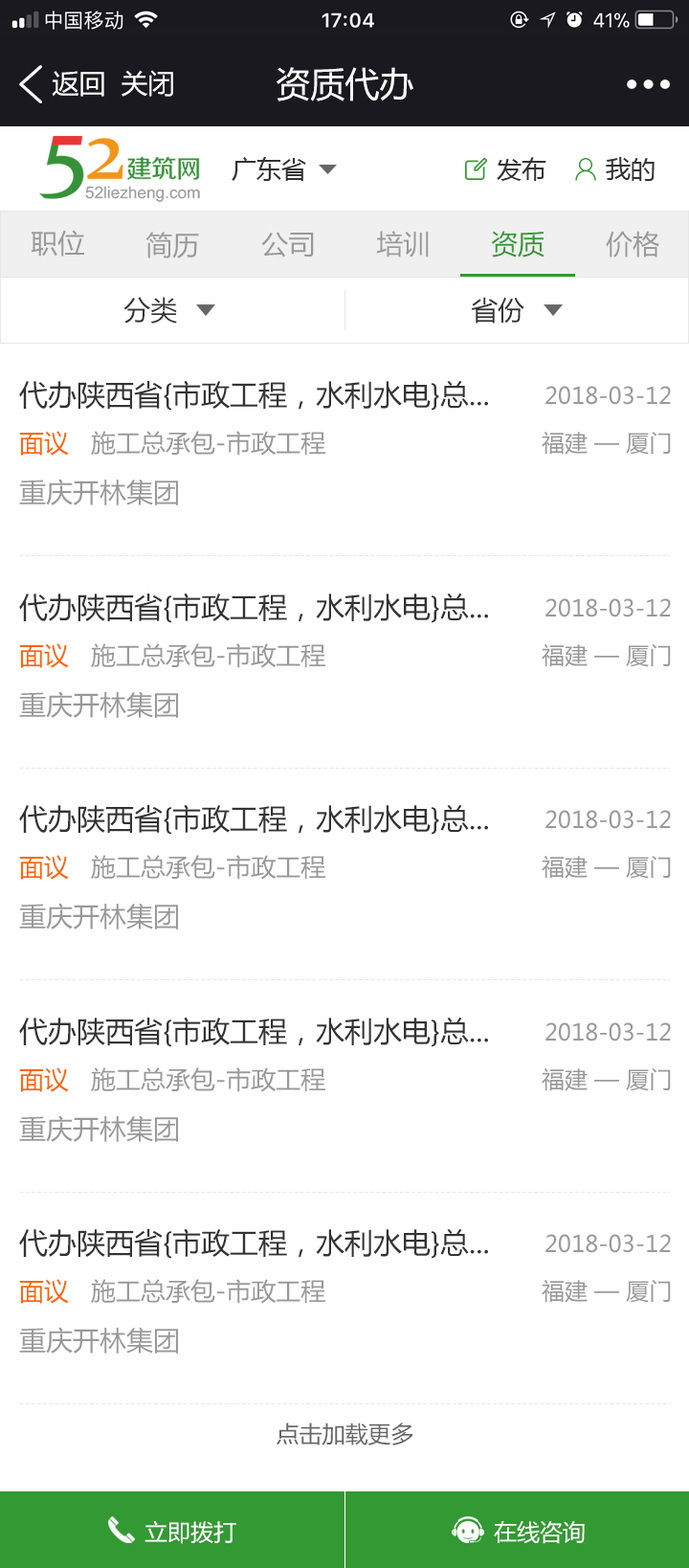
<style>
.page{position:relative;width:689px;height:1568px;background:#ffffff}
.page>*{position:absolute;margin:0}
.t1{font:26.8px "MicrosoftYaHei";color:#ffffff}
.t2{font:34.5px "MicrosoftYaHei";color:#ffffff}
.t3{font:24.9px "MicrosoftYaHei";color:#333333}
.t4{font:26.8px "MicrosoftYaHei";color:#999999}
.t5{font:26.8px "MicrosoftYaHei";color:#339933}
.t6{font:26.8px "MicrosoftYaHei";color:#333333}
.t7{font:28.7px "MicrosoftYaHei";color:#333333}
.t8{font:23px "MicrosoftYaHei";color:#999999}
.t9{font:24.9px "MicrosoftYaHei";color:#999999}
.t10{font:24.9px "MicrosoftYaHei";color:#ff6600}
.t11{font:23px "MicrosoftYaHei";color:#666666}
.t12{font:23px "MicrosoftYaHei";color:#ffffff}
</style>
<div class="page">
<p class="t1" style="left:52px;top:71px;width:52px;height:26px">返回</p>
<p class="t1" style="left:122px;top:70px;width:51px;height:27px">关闭</p>
<p class="t2" style="left:277px;top:67px;width:137px;height:34px">资质代办</p>
<p class="t3" style="left:232px;top:157px;width:74px;height:24px">广东省</p>
<p class="t3" style="left:497px;top:157px;width:50px;height:24px">发布</p>
<p class="t3" style="left:606px;top:157px;width:49px;height:24px">我的</p>
<p class="t4" style="left:31px;top:230px;width:53px;height:27px">职位</p>
<p class="t4" style="left:146px;top:232px;width:53px;height:26px">简历</p>
<p class="t4" style="left:261px;top:232px;width:53px;height:26px">公司</p>
<p class="t4" style="left:376px;top:231px;width:53px;height:27px">培训</p>
<p class="t5" style="left:491px;top:231px;width:54px;height:27px">资质</p>
<p class="t4" style="left:606px;top:231px;width:54px;height:27px">价格</p>
<p class="t6" style="left:123px;top:297px;width:54px;height:27px">分类</p>
<p class="t6" style="left:471px;top:297px;width:54px;height:27px">省份</p>
<p class="t7" style="left:19px;top:380px;width:469px;height:31px">代办陕西省{市政工程，水利水电}总...</p>
<p class="t8" style="left:546px;top:386px;width:125px;height:19px">2018-03-12</p>
<p class="t9" style="left:19px;top:431px;width:306px;height:25px"><span class="t10">面议</span>   施工总承包-市政工程</p>
<p class="t8" style="left:542px;top:432px;width:129px;height:23px">福建 — 厦门</p>
<p class="t4" style="left:19px;top:479px;width:159px;height:26px">重庆开林集团</p>
<p class="t7" style="left:19px;top:593px;width:469px;height:30px">代办陕西省{市政工程，水利水电}总...</p>
<p class="t8" style="left:546px;top:598px;width:125px;height:19px">2018-03-12</p>
<p class="t9" style="left:19px;top:643px;width:306px;height:25px"><span class="t10">面议</span>   施工总承包-市政工程</p>
<p class="t8" style="left:542px;top:644px;width:129px;height:23px">福建 — 厦门</p>
<p class="t4" style="left:19px;top:691px;width:159px;height:27px">重庆开林集团</p>
<p class="t7" style="left:19px;top:804px;width:469px;height:31px">代办陕西省{市政工程，水利水电}总...</p>
<p class="t8" style="left:546px;top:810px;width:125px;height:19px">2018-03-12</p>
<p class="t9" style="left:19px;top:855px;width:306px;height:25px"><span class="t10">面议</span>   施工总承包-市政工程</p>
<p class="t8" style="left:542px;top:856px;width:129px;height:23px">福建 — 厦门</p>
<p class="t4" style="left:19px;top:903px;width:159px;height:27px">重庆开林集团</p>
<p class="t7" style="left:19px;top:1017px;width:469px;height:30px">代办陕西省{市政工程，水利水电}总...</p>
<p class="t8" style="left:546px;top:1022px;width:125px;height:20px">2018-03-12</p>
<p class="t9" style="left:19px;top:1067px;width:306px;height:25px"><span class="t10">面议</span>   施工总承包-市政工程</p>
<p class="t8" style="left:542px;top:1068px;width:129px;height:23px">福建 — 厦门</p>
<p class="t4" style="left:19px;top:1115px;width:159px;height:27px">重庆开林集团</p>
<p class="t7" style="left:19px;top:1228px;width:469px;height:31px">代办陕西省{市政工程，水利水电}总...</p>
<p class="t8" style="left:546px;top:1234px;width:125px;height:19px">2018-03-12</p>
<p class="t9" style="left:19px;top:1279px;width:306px;height:25px"><span class="t10">面议</span>   施工总承包-市政工程</p>
<p class="t8" style="left:542px;top:1280px;width:129px;height:23px">福建 — 厦门</p>
<p class="t4" style="left:19px;top:1327px;width:159px;height:27px">重庆开林集团</p>
<p class="t11" style="left:277px;top:1422px;width:136px;height:23px">点击加载更多</p>
<p class="t12" style="left:145px;top:1520px;width:91px;height:24px">立即拨打</p>
<p class="t12" style="left:494px;top:1521px;width:91px;height:23px">在线咨询</p>
</div>
